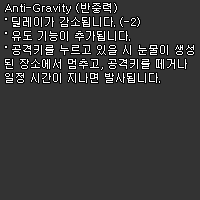
<style>
.page{position:relative;width:200px;height:200px;background:#333333}
.page>*{position:absolute;margin:0}
.t1{font:11px/14px "Dotum";color:#ffffff}
</style>
<div class="page">
<p class="t1" style="left:5px;top:3px;width:189px;height:80px">Anti-Gravity (반중력)<br>˚ 딜레이가 감소됩니다. (-2)<br>˚ 유도 기능이 추가됩니다.<br>˚ 공격키를 누르고 있을 시 눈물이 생성<br>된 장소에서 멈추고, 공격키를 떼거나<br>일정 시간이 지나면 발사됩니다.</p>
</div>
